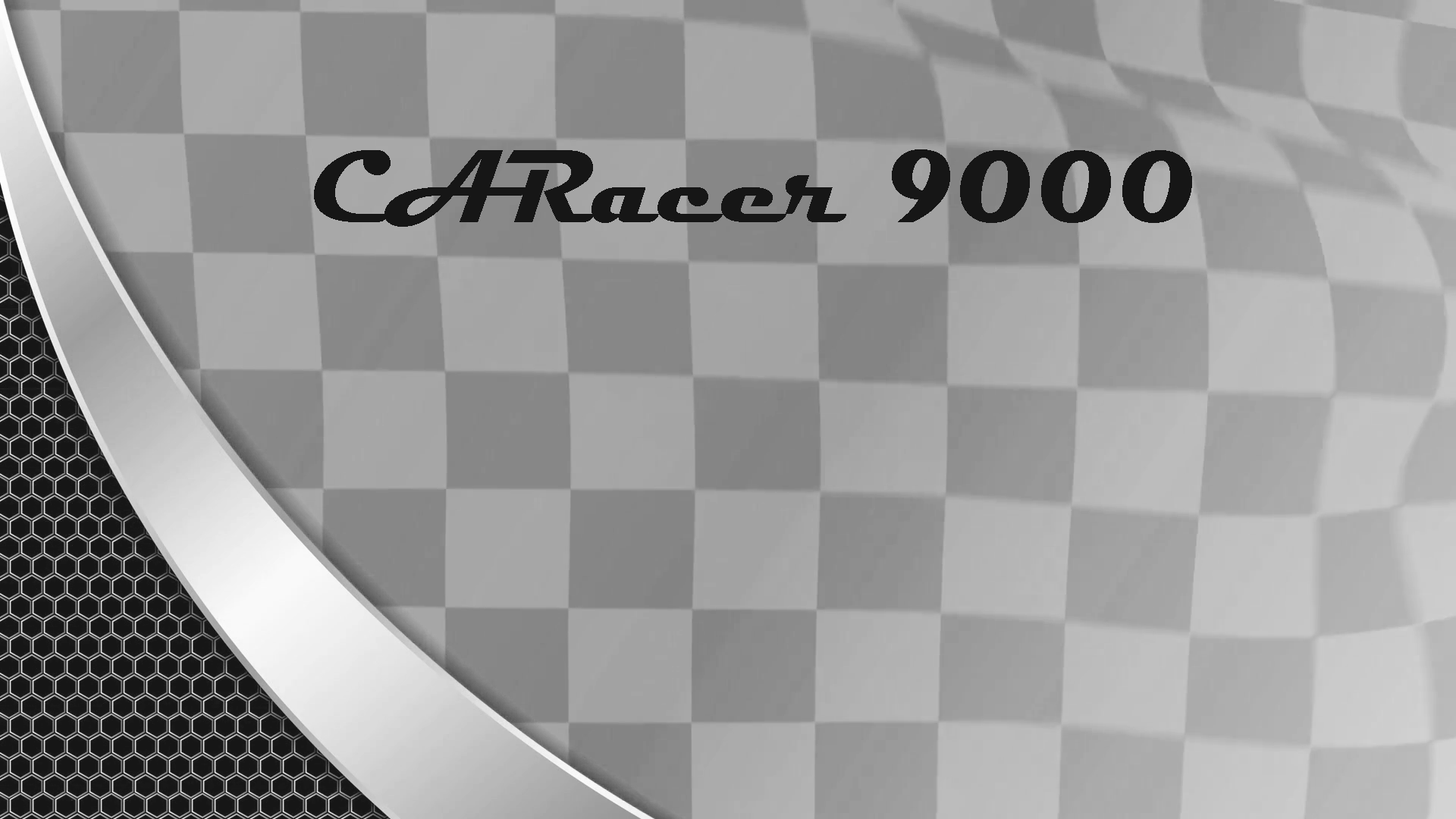
<style>
.page{position:relative;width:1456px;height:819px}
.page>*{position:absolute;margin:0}
.t1{font:104.6px "Magneto-Bold";color:#000000}
</style>
<div class="page">
<p class="t1" style="left:314px;top:149px;width:878px;height:78px">CARacer 9000</p>
</div>
